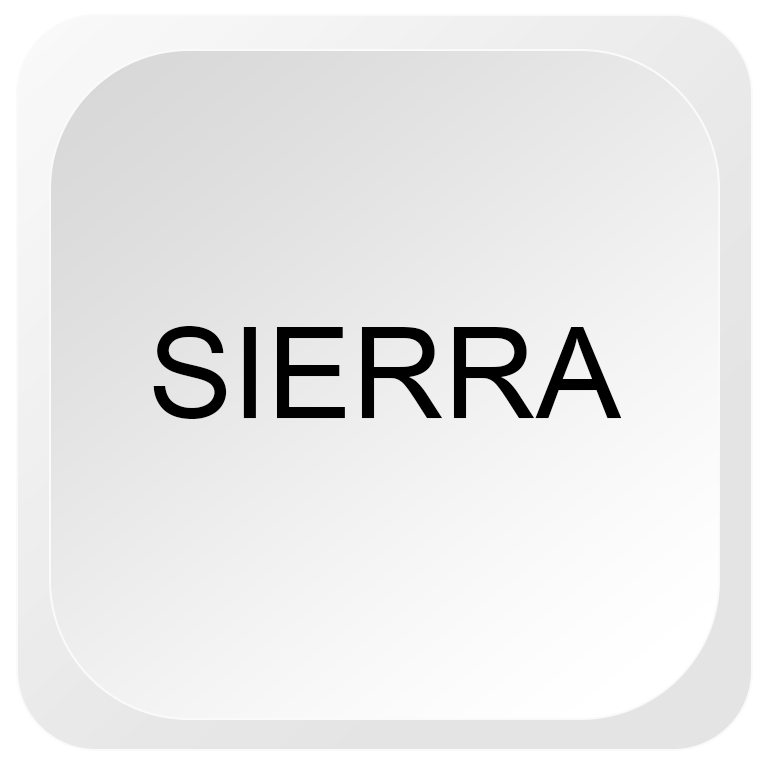
<style>
.page{position:relative;width:768px;height:768px}
.page>*{position:absolute;margin:0}
.t1{font:127px "ArialMT";color:#000000}
</style>
<div class="page">
<p class="t1" style="left:153px;top:326px;width:468px;height:93px">SIERRA</p>
</div>
